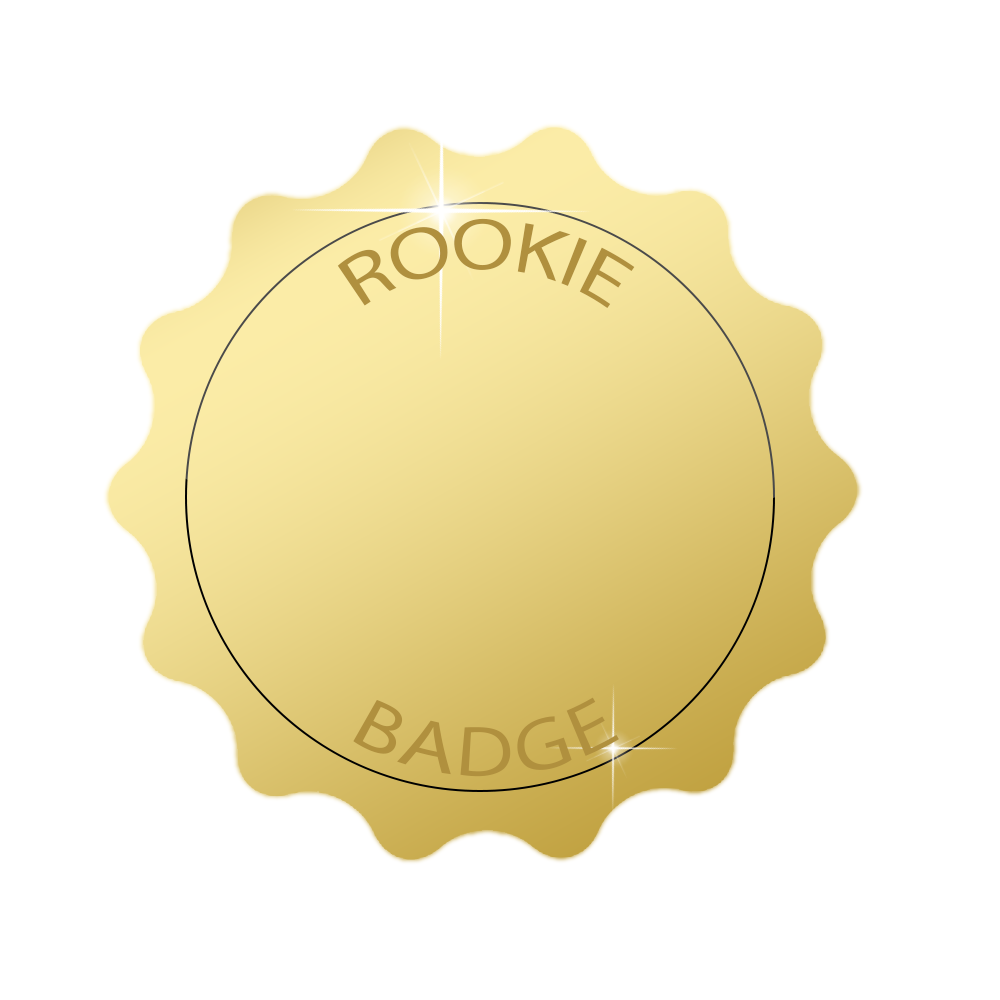
<style>
.page{position:relative;width:1000px;height:1000px;background:#ffffff}
.page>*{position:absolute;margin:0}
.t1{font:72px "MyriadPro-Regular";color:#b0903e}
</style>
<div class="page">
<p class="t1" style="left:337px;top:218px;width:298px;height:90px">ROOKIE</p>
<p class="t1" style="left:353px;top:697px;width:266px;height:80px">BADGE</p>
</div>
